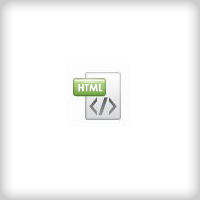
<style>
.page{position:relative;width:200px;height:200px;background:#ffffff}
.page>*{position:absolute;margin:0}
.t1{font:9.5px "CenturyGothic-Bold";color:#ffffff;font-weight:bold;scale:1.05 1}
</style>
<div class="page">
<p class="t1" style="left:78px;top:84px;width:25px;height:8px">HTML</p>
</div>
